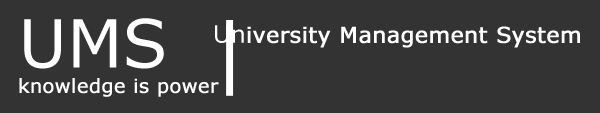
<style>
.page{position:relative;width:600px;height:113px;background:#333333}
.page>*{position:absolute;margin:0}
.t1{font:66.1px "Verdana";color:#ffffff}
.t2{font:22px "Verdana";color:#ffffff;font-weight:bold}
.t3{font:24px "Verdana";color:#ffffff}
.t4{font:19.3px "Verdana";color:#ffffff;font-weight:bold}
</style>
<div class="page">
<p class="t1" style="left:24px;top:18px;width:140px;height:51px">UMS</p>
<p class="t2" style="left:215px;top:25px;width:365px;height:23px"><span class="t3">Un</span>iversity Management System</p>
<p class="t4" style="left:19px;top:78px;width:200px;height:19px">knowledge is power</p>
</div>
